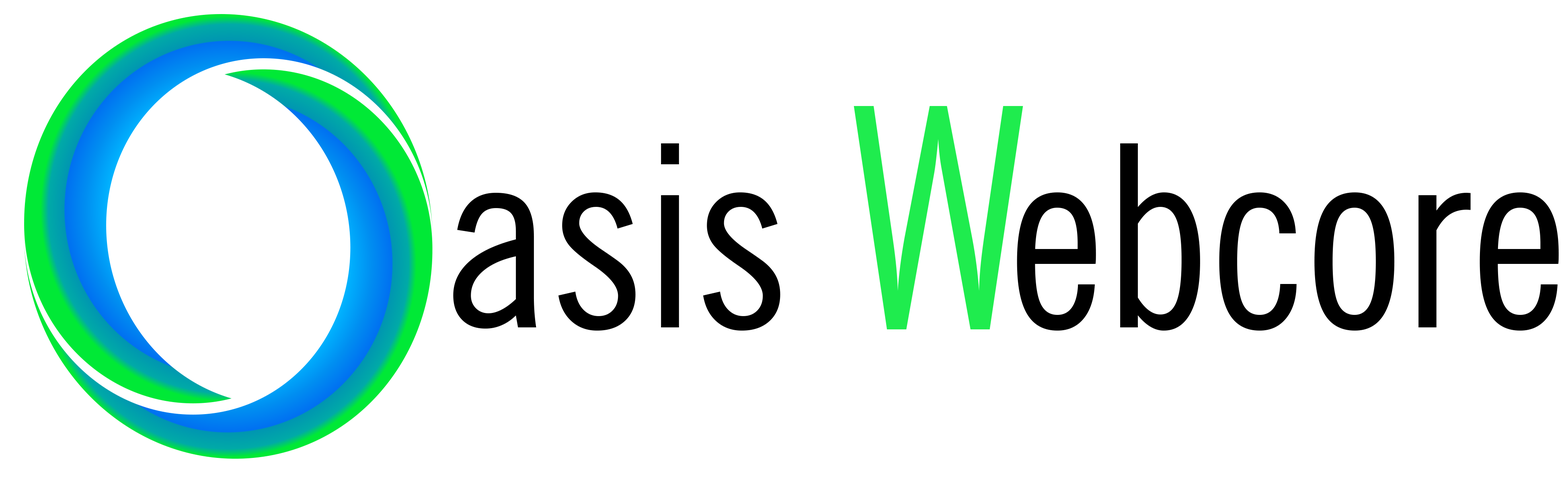
<style>
.page{position:relative;width:1568px;height:482px;background:#ffffff}
.page>*{position:absolute;margin:0}
.t1{font:308.9px "NewsGothicBT-RomanCondensed";color:#1fec4e;scale:0.94 1}
.t2{font:254.6px "NewsGothicBT-RomanCondensed";color:#000000}
</style>
<div class="page">
<p class="t1" style="left:854px;top:106px;width:169px;height:224px">W</p>
<p class="t2" style="left:453px;top:143px;width:1106px;height:188px">asis    ebcore</p>
</div>
